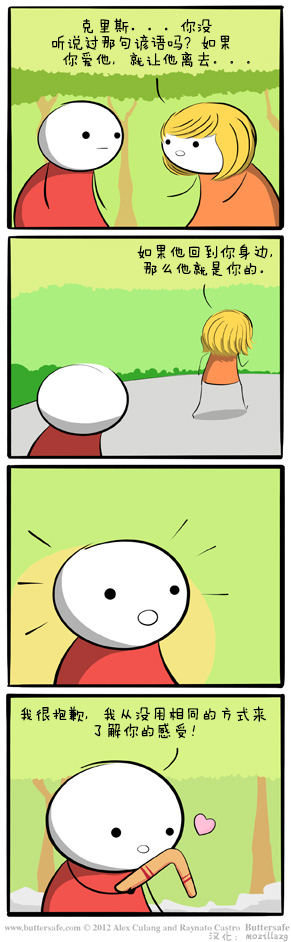
<style>
.page{position:relative;width:291px;height:942px}
.page>*{position:absolute;margin:0}
.t1{font:16.7px/16.7px "FZMWJW--GB1-0";color:#000000}
.t2{font:12.5px "FZMWJW--GB1-0";color:#b2b2b2}
</style>
<div class="page">
<p class="t1" style="left:52px;top:18px;width:198px;height:49px">克里斯。。。你没<br>听说过那句谚语吗？如果<br>  你爱他，就让他离去。。。</p>
<p class="t1" style="left:137px;top:244px;width:135px;height:32px">如果他回到你身边，<br> 那么他就是你的。</p>
<p class="t1" style="left:20px;top:706px;width:246px;height:33px">我很抱歉，我从没用相同的方式来<br>            了解你的感受！</p>
<p class="t2" style="left:209px;top:931px;width:79px;height:11px">汉化：mozillazg</p>
</div>
